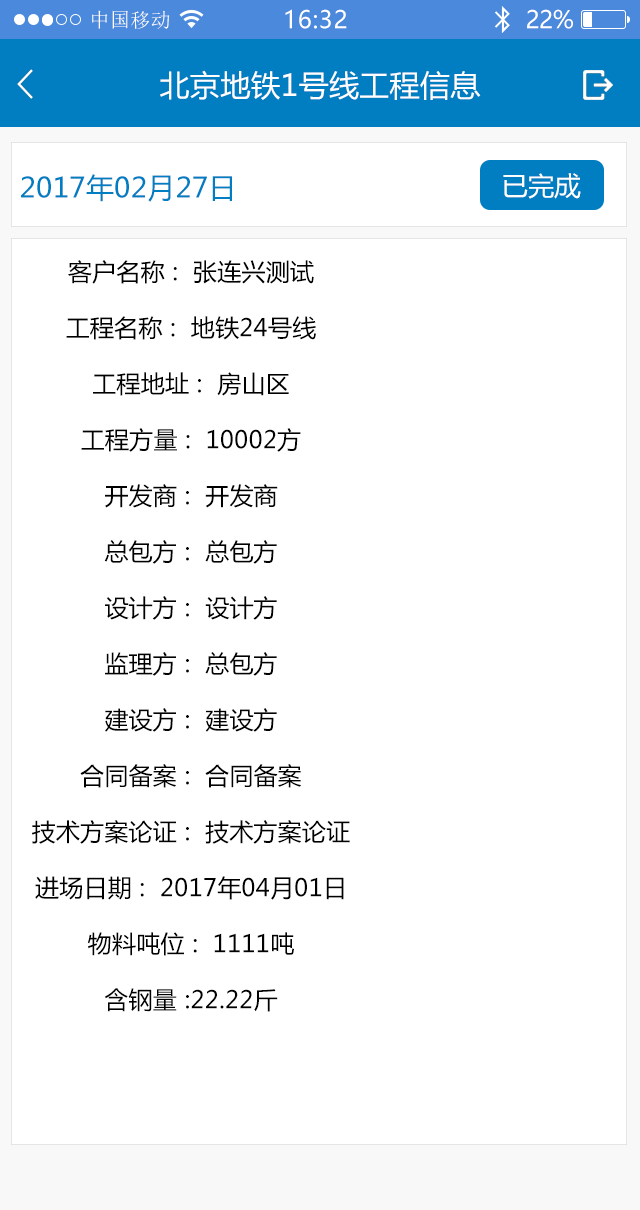
<style>
.page{position:relative;width:640px;height:1210px;background:#ffffff}
.page>*{position:absolute;margin:0}
.t1{font:20px "SimSun";letter-spacing:0.02em;color:#ffffff}
.t2{font:24px "MicrosoftYaHei";letter-spacing:0.025em;color:#ffffff}
.t3{font:24px "MicrosoftYaHei";letter-spacing:-0.02em;color:#ffffff}
.t4{font:30px "MicrosoftYaHei";letter-spacing:0.01em;color:#ffffff}
.t5{font:27.8px "MicrosoftYaHei";letter-spacing:0.01em;color:#017ec1}
.t6{font:26.2px "MicrosoftYaHei";letter-spacing:0.01em;color:#ffffff}
.t7{font:24px/56px "MicrosoftYaHei";letter-spacing:0.01em;color:#000000}
</style>
<div class="page">
<p class="t1" style="left:92px;top:10px;width:78px;height:19px">中国移动</p>
<p class="t2" style="left:285px;top:9px;width:62px;height:20px">16:32</p>
<p class="t3" style="left:527px;top:9px;width:46px;height:20px">22%</p>
<p class="t4" style="left:160px;top:70px;width:321px;height:30px">北京地铁1号线工程信息</p>
<p class="t5" style="left:21px;top:174px;width:211px;height:28px">2017年02月27日</p>
<p class="t6" style="left:503px;top:173px;width:78px;height:26px">已完成</p>
<p class="t7" style="left:32px;top:260px;width:318px;height:752px;text-align:center">客户名称 :  张连兴测试<br>工程名称 :  地铁24号线<br>工程地址 :  房山区<br>工程方量 :  10002方<br>开发商 :  开发商<br>总包方 :  总包方<br>设计方 :  设计方<br>监理方 :  总包方<br>建设方 :  建设方<br>合同备案 :  合同备案<br>技术方案论证 :  技术方案论证<br>进场日期 :  2017年04月01日<br>物料吨位 :  1111吨<br>含钢量 :22.22斤</p>
</div>
